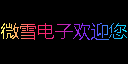
<style>
.page{position:relative;width:128px;height:64px;background:#000000}
.page>*{position:absolute;margin:0}
.t1{font:18px "MicrosoftYaHeiUI"}
</style>
<div class="page">
<p class="t1" style="left:1px;top:23px;width:126px;height:17px">微雪电子欢迎您</p>
</div>
